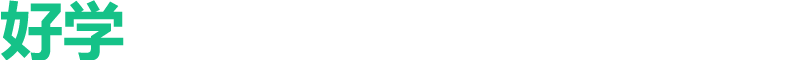
<style>
.page{position:relative;width:800px;height:60px;background:#ffffff}
.page>*{position:absolute;margin:0}
.t1{font:62.4px "MicrosoftYaHei-Bold";color:#15c288}
</style>
<div class="page">
<p class="t1" style="left:1px;top:0px;width:123px;height:61px">好学</p>
</div>
